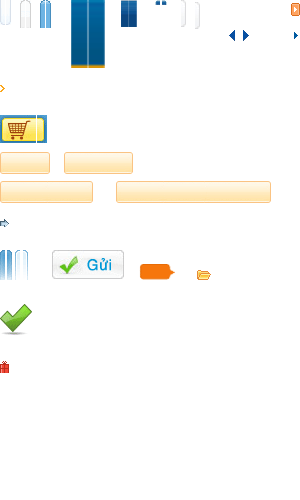
<style>
.page{position:relative;width:300px;height:500px;background:#ffffff}
.page>*{position:absolute;margin:0}
.t1{font:15px "VNI-Helve";color:#0098d7}
</style>
<div class="page">
<p class="t1" style="left:87px;top:258px;width:24px;height:13px">Göûi</p>
</div>
